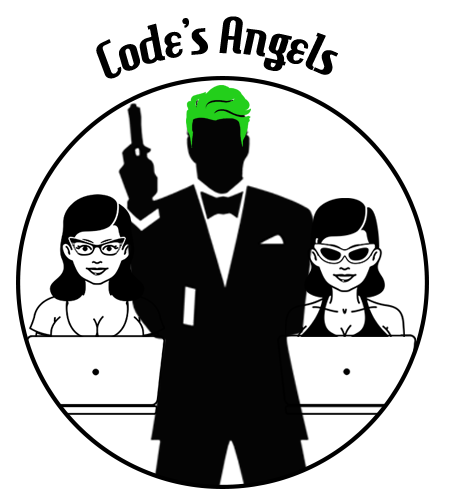
<style>
.page{position:relative;width:454px;height:498px;background:#ffffff}
.page>*{position:absolute;margin:0}
.t1{font:12px "HamburgerHeaven";color:#000000}
</style>
<div class="page">
<p class="t1" style="left:96px;top:16px;width:242px;height:63px;rotate:-30deg">Code’s Angels</p>
</div>
